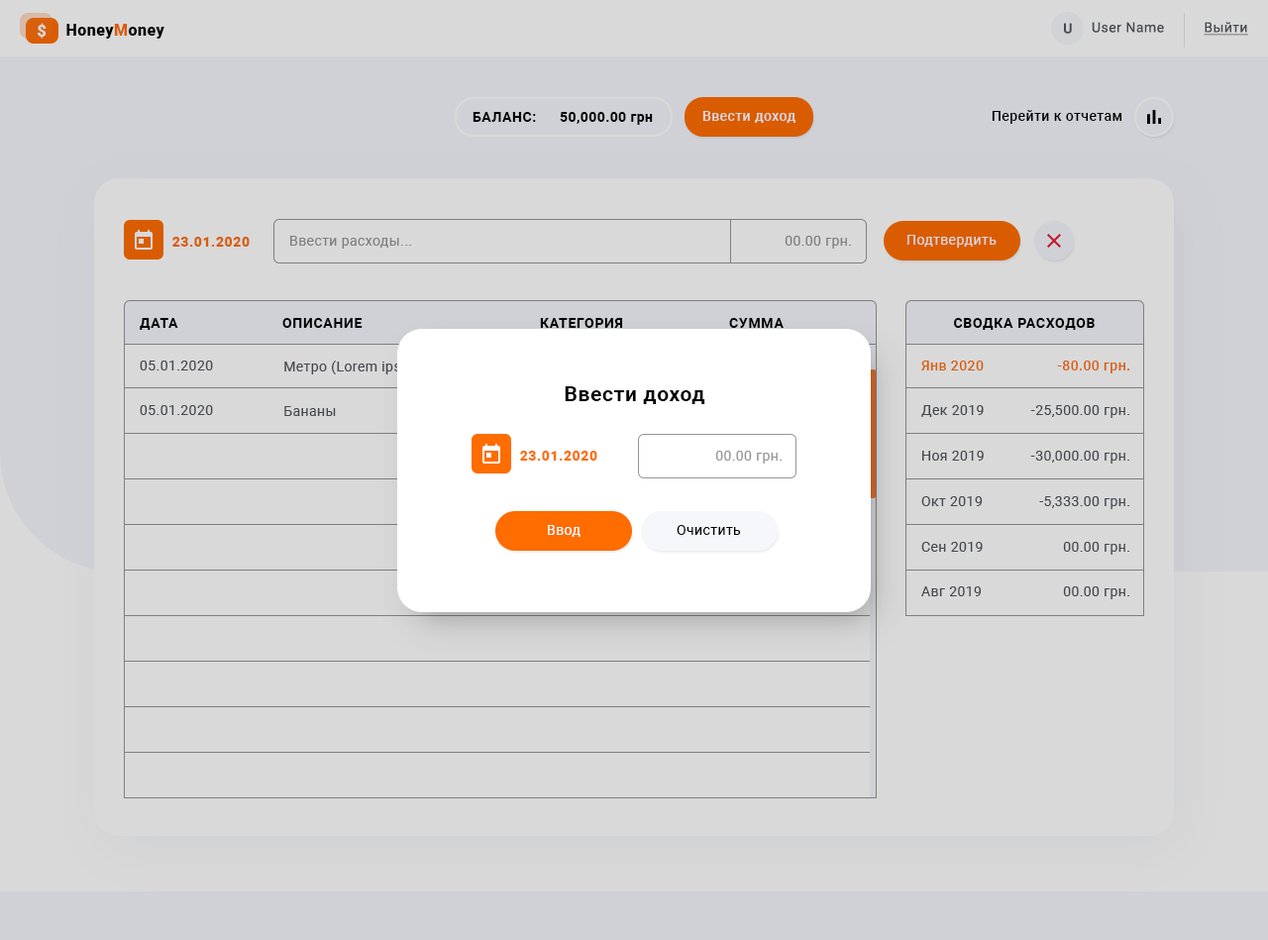
<style>
.page{position:relative;width:1268px;height:940px;background:#d9d9d9}
.page>*{position:absolute;margin:0}
.t1{font:15.9px "Roboto-Black";letter-spacing:0.03em;color:#d9d9d9}
.t2{font:15.9px "Roboto-Black";letter-spacing:0.03em;color:#000000}
.t3{font:15.9px "Roboto-Black";letter-spacing:0.03em;color:#ff6c00}
.t4{font:13.9px "Roboto-Medium";letter-spacing:0.035em;color:#52555f}
.t5{font:13.9px "Roboto-Regular";letter-spacing:0.035em;color:#52555f}
.t6{font:13.9px "Roboto-Regular";letter-spacing:0.03em;color:#52555f;text-decoration:underline}
.t7{font:13.9px "Roboto-Bold";letter-spacing:0.04em;color:#000000;text-transform:uppercase}
.t8{font:13.9px "Roboto-Bold";letter-spacing:0.03em;color:#000000}
.t9{font:13.9px "Roboto-Medium";letter-spacing:0.03em;color:#d9d9d9}
.t10{font:13.9px "Roboto-Medium";letter-spacing:0.03em;color:#000000}
.t11{font:13.9px "Roboto-Black";letter-spacing:0.04em;color:#d95c00}
.t12{font:13.9px "Roboto-Regular";letter-spacing:0.03em;color:#959595}
.t13{font:13.9px "Roboto-Regular";letter-spacing:0.03em;color:#d9d9d9}
.t14{font:13.9px "Roboto-Bold";letter-spacing:0.05em;color:#000000;text-transform:uppercase}
.t15{font:13.9px "Roboto-Regular";letter-spacing:0.03em;color:#52555f}
.t16{font:13.9px "Roboto-Medium";letter-spacing:0.03em;color:#d8600b}
.t17{font:20.8px "Roboto-Bold";letter-spacing:0.03em;color:#000000}
.t18{font:13.9px "Roboto-Black";letter-spacing:0.04em;color:#ff6c00}
.t19{font:13.9px "Roboto-Regular";letter-spacing:0.03em;color:#ffffff}
.t20{font:13.9px "Roboto-Regular";letter-spacing:0.03em;color:#000000}
</style>
<div class="page">
<p class="t1" style="left:38px;top:23px;width:9px;height:16px">$</p>
<p class="t2" style="left:66px;top:24px;width:98px;height:15px">Honey<span class="t3">M</span>oney</p>
<p class="t4" style="left:1064px;top:23px;width:8px;height:11px">U</p>
<p class="t5" style="left:1092px;top:22px;width:72px;height:11px">User Name</p>
<p class="t6" style="left:1204px;top:22px;width:44px;height:14px">Выйти</p>
<p class="t7" style="left:473px;top:112px;width:63px;height:10px">баланс:</p>
<p class="t8" style="left:560px;top:112px;width:93px;height:13px">50,000.00 грн</p>
<p class="t9" style="left:702px;top:111px;width:94px;height:12px">Ввести доход</p>
<p class="t10" style="left:992px;top:110px;width:131px;height:14px">Перейти к отчетам</p>
<p class="t11" style="left:172px;top:237px;width:78px;height:10px">23.01.2020</p>
<p class="t12" style="left:290px;top:236px;width:121px;height:13px">Ввести расходы...</p>
<p class="t12" style="left:785px;top:236px;width:66px;height:13px">00.00 грн.</p>
<p class="t13" style="left:908px;top:235px;width:89px;height:13px">Подтвердить</p>
<p class="t14" style="left:140px;top:318px;width:38px;height:12px">Дата</p>
<p class="t14" style="left:282px;top:318px;width:81px;height:10px">Описание</p>
<p class="t14" style="left:540px;top:318px;width:83px;height:10px">Категория</p>
<p class="t14" style="left:729px;top:318px;width:55px;height:10px">Сумма</p>
<p class="t14" style="left:954px;top:318px;width:141px;height:12px">Сводка расходов</p>
<p class="t15" style="left:140px;top:361px;width:73px;height:10px">05.01.2020</p>
<p class="t15" style="left:284px;top:361px;width:202px;height:14px">Метро (Lorem ipsum dolor si...</p>
<p class="t16" style="left:921px;top:361px;width:63px;height:10px">Янв 2020</p>
<p class="t16" style="left:1057px;top:361px;width:72px;height:13px">-80.00 грн.</p>
<p class="t17" style="left:565px;top:386px;width:140px;height:18px">Ввести доход</p>
<p class="t15" style="left:140px;top:405px;width:73px;height:10px">05.01.2020</p>
<p class="t15" style="left:284px;top:406px;width:52px;height:10px">Бананы</p>
<p class="t15" style="left:921px;top:405px;width:63px;height:12px">Дек 2019</p>
<p class="t15" style="left:1030px;top:405px;width:99px;height:13px">-25,500.00 грн.</p>
<p class="t18" style="left:520px;top:451px;width:77px;height:10px">23.01.2020</p>
<p class="t12" style="left:715px;top:451px;width:67px;height:13px">00.00 грн.</p>
<p class="t15" style="left:922px;top:451px;width:62px;height:10px">Ноя 2019</p>
<p class="t15" style="left:1030px;top:451px;width:99px;height:13px">-30,000.00 грн.</p>
<p class="t15" style="left:921px;top:496px;width:62px;height:10px">Окт 2019</p>
<p class="t15" style="left:1039px;top:496px;width:90px;height:13px">-5,333.00 грн.</p>
<p class="t19" style="left:548px;top:525px;width:33px;height:12px">Ввод</p>
<p class="t20" style="left:677px;top:525px;width:64px;height:10px">Очистить</p>
<p class="t15" style="left:921px;top:542px;width:62px;height:10px">Сен 2019</p>
<p class="t15" style="left:1063px;top:542px;width:66px;height:13px">00.00 грн.</p>
<p class="t15" style="left:921px;top:587px;width:61px;height:9px">Авг 2019</p>
<p class="t15" style="left:1063px;top:587px;width:66px;height:12px">00.00 грн.</p>
</div>
